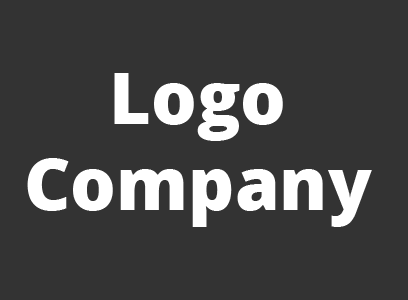
<style>
.page{position:relative;width:408px;height:300px;background:#333333}
.page>*{position:absolute;margin:0}
.t1{font:72px "OpenSans-Extrabold";color:#ffffff}
</style>
<div class="page">
<p class="t1" style="left:27px;top:73px;width:345px;height:154px;text-align:center">Logo<br>Company</p>
</div>
